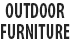
<style>
.page{position:relative;width:70px;height:44px;background:#ffffff}
.page>*{position:absolute;margin:0}
.t1{font:21.8px/20.3px "MyriadPro-BoldCond";color:#252525;scale:0.83 1}
</style>
<div class="page">
<p class="t1" style="left:1px;top:3px;width:69px;height:36px;text-align:center">OUTDOOR<br>FURNITURE</p>
</div>
